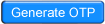
<style>
.page{position:relative;width:105px;height:24px;background:#138fff}
.page>*{position:absolute;margin:0}
.t1{font:13px "ArialMT";color:#ffffff}
</style>
<div class="page">
<p class="t1" style="left:11px;top:7px;width:84px;height:11px">Generate OTP</p>
</div>
